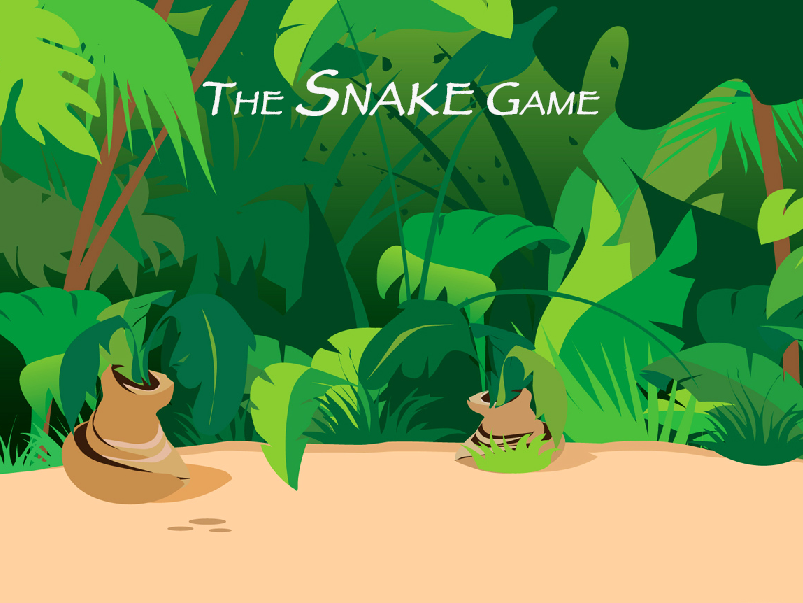
<style>
.page{position:relative;width:803px;height:603px;background:#ffd1a0}
.page>*{position:absolute;margin:0}
.t1{font:65px "Papyrus";color:#f7f7f7;font-variant:small-caps;font-weight:bold;font-style:italic}
.t2{font:47px "Papyrus";color:#f7f7f7;font-variant:small-caps;font-weight:bold;font-style:italic}
</style>
<div class="page">
<p class="t1" style="left:202px;top:69px;width:398px;height:47px"><span class="t2">The </span>Snake <span class="t2">Game</span></p>
</div>
